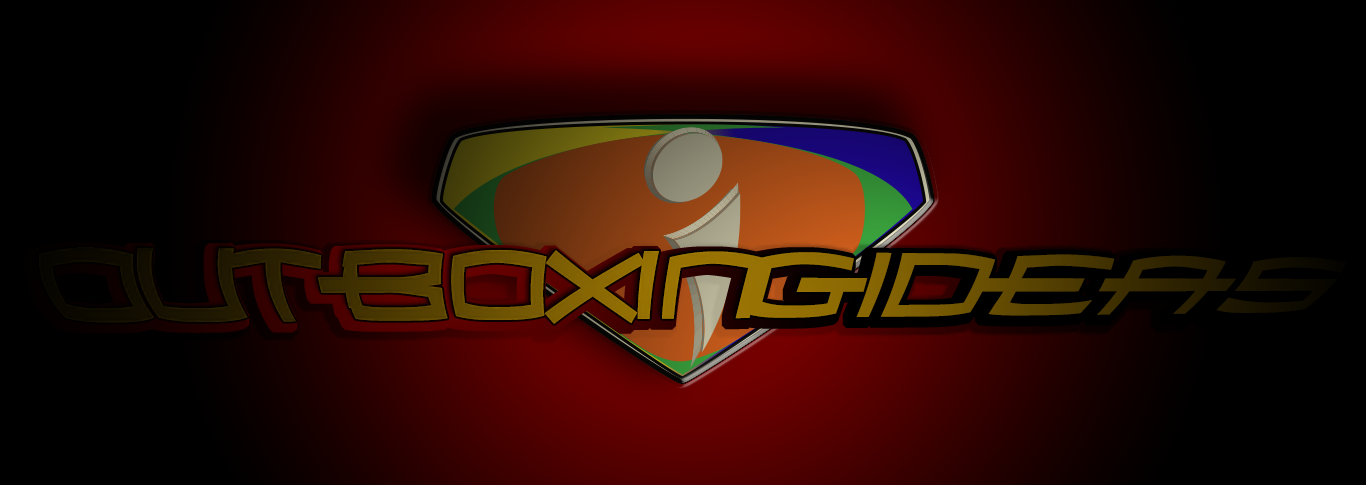
<style>
.page{position:relative;width:1366px;height:485px;background:#000000}
.page>*{position:absolute;margin:0}
.t1{font:125.4px "Homoarakhn";letter-spacing:-0.15em}
</style>
<div class="page">
<p class="t1" style="left:39px;top:247px;width:1307px;height:77px">OutboxingIdeas</p>
</div>
